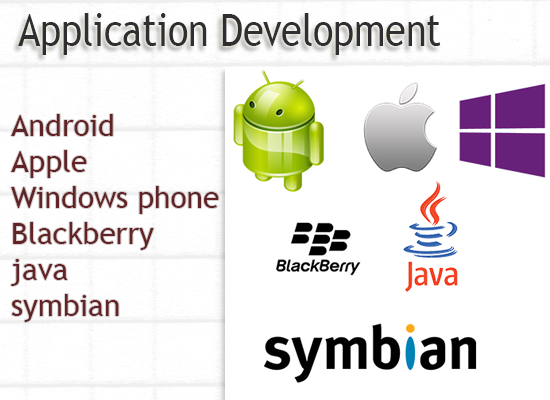
<style>
.page{position:relative;width:550px;height:400px;background:#ffffff}
.page>*{position:absolute;margin:0}
.t1{font:44.7px "TrebuchetMS";color:#312e32;scale:0.84 1}
.t2{font:30px "TrebuchetMS";color:#612326}
</style>
<div class="page">
<p class="t1" style="left:18px;top:13px;width:423px;height:42px">Application Development</p>
<p class="t2" style="left:11px;top:114px;width:208px;height:208px">Android<br>Apple<br>Windows phone<br>Blackberry<br>java<br>symbian</p>
</div>
